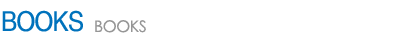
<style>
.page{position:relative;width:400px;height:39px;background:#ffffff}
.page>*{position:absolute;margin:0}
.t1{font:26px "YGO540";letter-spacing:-0.025em;color:#0072bc}
.t2{font:16px "CenturyGothic";letter-spacing:-0.025em;color:#969696}
</style>
<div class="page">
<p class="t1" style="left:2px;top:10px;width:81px;height:22px">BOOKS</p>
<p class="t2" style="left:95px;top:20px;width:51px;height:13px">BOOKS</p>
</div>
